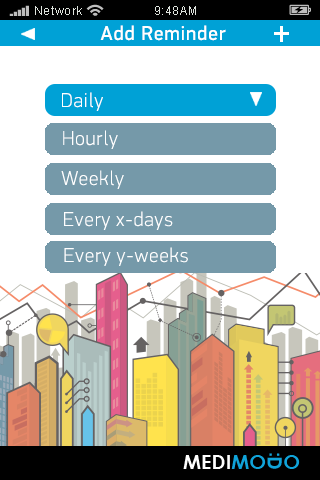
<style>
.page{position:relative;width:320px;height:480px;background:#ffffff}
.page>*{position:absolute;margin:0}
.t1{font:12px "ArialMT";letter-spacing:0.05em;color:#dfe4de}
.t2{font:20px "PFDinDisplayPro-Regular";letter-spacing:0.05em;color:#ffffff}
.t3{font:20px "PFDinDisplayPro-Thin";letter-spacing:0.05em;color:#ffffff}
</style>
<div class="page">
<p class="t1" style="left:35px;top:6px;width:47px;height:9px">Network</p>
<p class="t1" style="left:155px;top:6px;width:41px;height:9px">9:48AM</p>
<p class="t2" style="left:100px;top:25px;width:126px;height:16px">Add Reminder</p>
<p class="t3" style="left:62px;top:92px;width:41px;height:19px">Daily</p>
<p class="t3" style="left:63px;top:130px;width:55px;height:19px">Hourly</p>
<p class="t3" style="left:61px;top:170px;width:63px;height:19px">Weekly</p>
<p class="t3" style="left:64px;top:211px;width:109px;height:19px">Every x-days</p>
<p class="t3" style="left:64px;top:247px;width:124px;height:19px">Every y-weeks</p>
</div>
